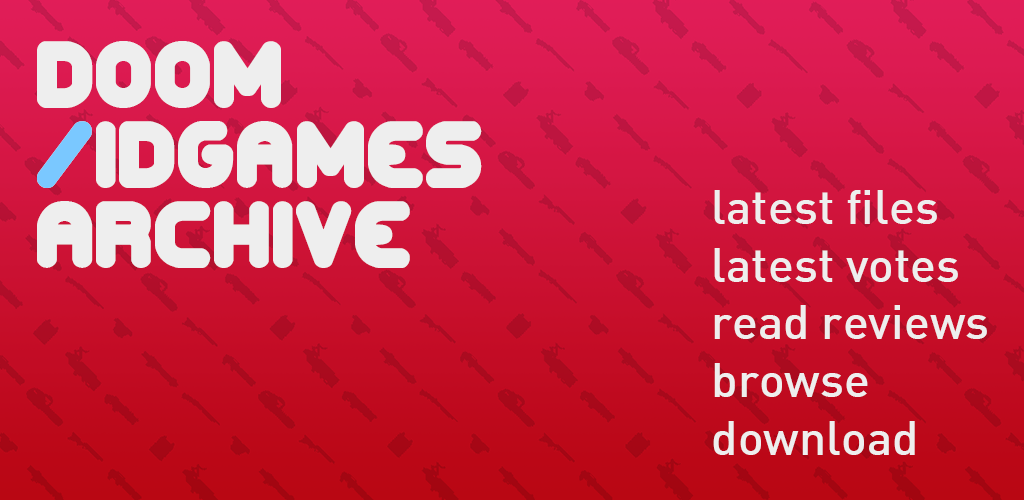
<style>
.page{position:relative;width:1024px;height:500px}
.page>*{position:absolute;margin:0}
.t1{font:96px/80px "CorpulentCapsBRK";color:#eeeeee}
.t2{font:96px "CorpulentCapsBRK";color:#7ac8ff}
.t3{font:48px "DIN-Medium";color:#eeeeee}
</style>
<div class="page">
<p class="t1" style="left:37px;top:41px;width:445px;height:227px">doom<br>/idgames<br>Archive</p>
<p class="t2" style="left:37px;top:121px;width:55px;height:67px">/</p>
<p class="t3" style="left:713px;top:190px;width:274px;height:265px">latest files<br>latest votes<br>read reviews<br>browse<br>download</p>
</div>
